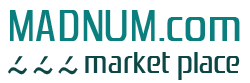
<style>
.page{position:relative;width:250px;height:83px;background:#ffffff}
.page>*{position:absolute;margin:0}
.t1{font:46.3px "Zrnic";color:#0b7f7e}
.t2{font:32px "Zrnic";color:#0c4746}
.t3{font:34.2px "BookshelfSymbolSeven";color:#0c4746;scale:0.74 1}
</style>
<div class="page">
<p class="t1" style="left:10px;top:10px;width:230px;height:31px">MADNUM.com</p>
<p class="t2" style="left:85px;top:52px;width:155px;height:28px">market place</p>
<p class="t3" style="left:8px;top:56px;width:70px;height:19px">```</p>
</div>
